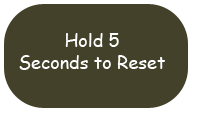
<style>
.page{position:relative;width:200px;height:120px;background:#44412b}
.page>*{position:absolute;margin:0}
.t1{font:18px "ComicSansMS";color:#ffffff}
</style>
<div class="page">
<p class="t1" style="left:19px;top:33px;width:146px;height:37px;text-align:center">Hold 5 Seconds to Reset</p>
</div>
